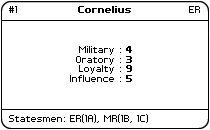
<style>
.page{position:relative;width:210px;height:130px;background:#ffffff}
.page>*{position:absolute;margin:0}
.t1{font:8px "PFTempestaSeven";color:#000000}
.t2{font:8px "PFTempestaSeven-Bold";color:#000000}
</style>
<div class="page">
<p class="t1" style="left:9px;top:6px;width:8px;height:7px">#1</p>
<p class="t2" style="left:78px;top:6px;width:53px;height:7px">Cornelius</p>
<p class="t1" style="left:189px;top:6px;width:11px;height:7px">ER</p>
<p class="t1" style="left:70px;top:46px;width:62px;height:36px;text-align:right">Military : <span class="t2">4<br></span>Oratory : <span class="t2">3<br></span>Loyalty : <span class="t2">9<br></span>Influence : <span class="t2">5</span></p>
<p class="t1" style="left:9px;top:114px;width:139px;height:9px">Statesmen: ER(1A), MR(1B, 1C)</p>
</div>
